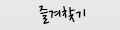
<style>
.page{position:relative;width:120px;height:30px;background:#e7e7e7}
.page>*{position:absolute;margin:0}
.t1{font:20px "NanumPen";color:#000000}
</style>
<div class="page">
<p class="t1" style="left:38px;top:5px;width:48px;height:19px">즐겨찾기</p>
</div>
